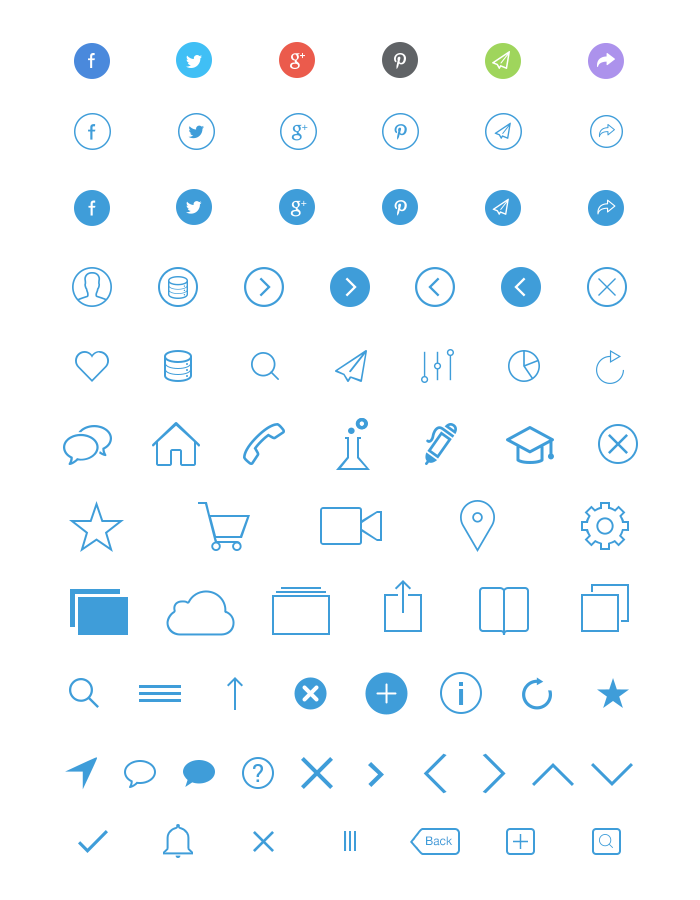
<style>
.page{position:relative;width:700px;height:900px;background:#ffffff}
.page>*{position:absolute;margin:0}
.t1{font:12px "HelveticaNeue";color:#3f9dd9}
</style>
<div class="page">
<p class="t1" style="left:426px;top:836px;width:27px;height:10px">Back</p>
</div>
